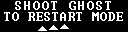
<style>
.page{position:relative;width:128px;height:32px;background:#000000}
.page>*{position:absolute;margin:0}
.t1{font:12.9px "Terminal";letter-spacing:0.075em;color:#ffffff}
.t2{font:12.9px "Terminal";color:#ffffff}
</style>
<div class="page">
<p class="t1" style="left:15px;top:1px;width:96px;height:9px">SHOOT GHOST</p>
<p class="t2" style="left:4px;top:12px;width:119px;height:9px">TO RESTART MODE</p>
</div>
